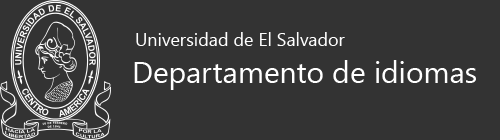
<style>
.page{position:relative;width:500px;height:140px;background:#333333}
.page>*{position:absolute;margin:0}
.t1{font:18px "SegoeUI";color:#ffffff}
.t2{font:30px "SegoeUI";color:#ffffff}
</style>
<div class="page">
<p class="t1" style="left:136px;top:32px;width:209px;height:14px">Universidad de El Salvador</p>
<p class="t2" style="left:134px;top:60px;width:342px;height:30px">Departamento de idiomas</p>
</div>
